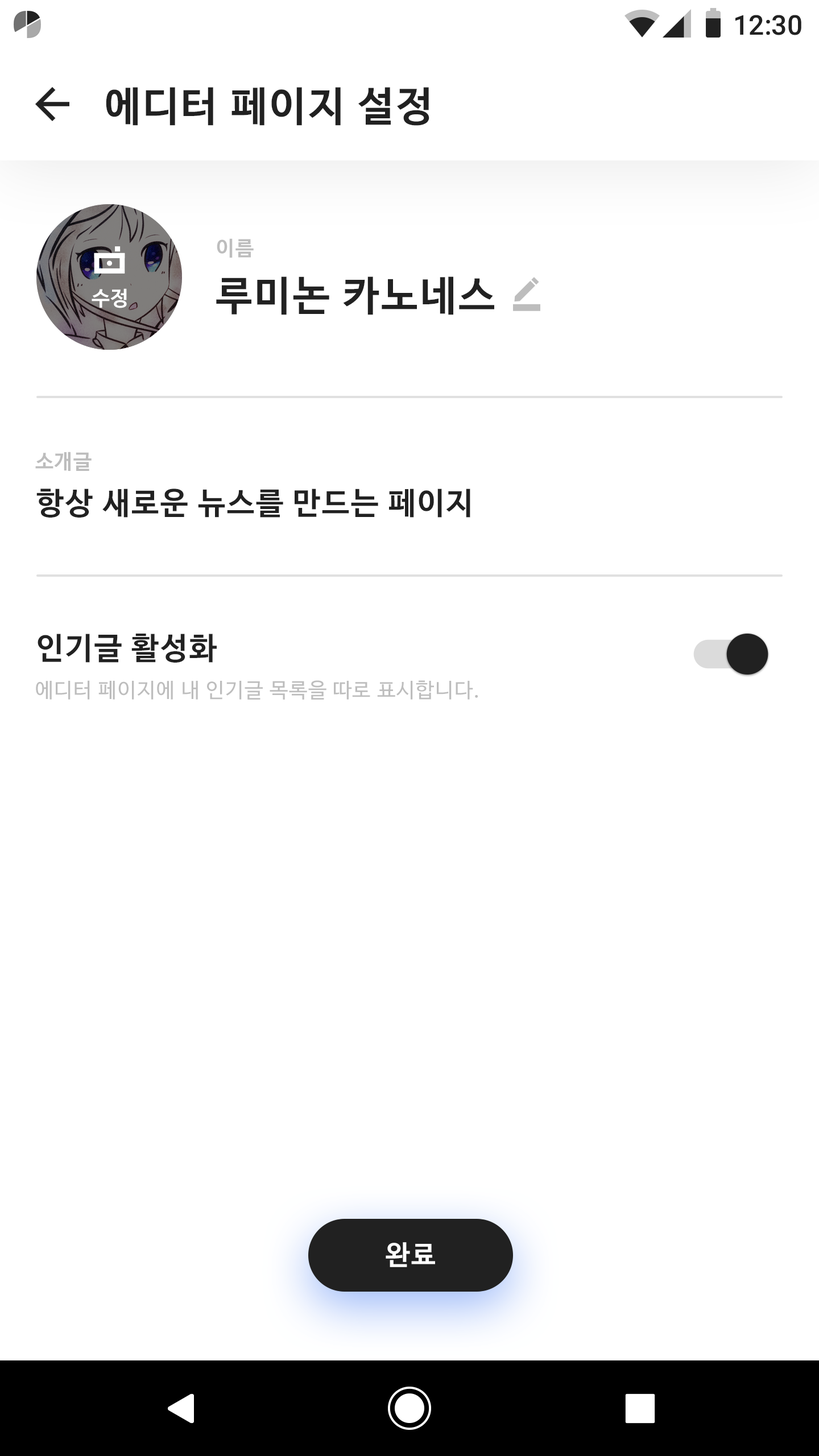
<style>
.page{position:relative;width:819px;height:1456px;background:#ffffff}
.page>*{position:absolute;margin:0}
.t1{font:27.3px "Roboto-Medium";color:#212121}
.t2{font:40.9px "NanumBarunGothicBold";letter-spacing:0.05em;color:#212121}
.t3{font:20.5px "NanumBarunGothicBold";letter-spacing:0.05em;color:#bdbdbd}
.t4{font:20.5px "NanumBarunGothicBold";letter-spacing:0.05em;color:#ffffff}
.t5{font:30.7px "NanumBarunGothicBold";letter-spacing:0.05em;color:#212121}
.t6{font:20.5px "NanumBarunGothic";letter-spacing:0.05em;color:#bdbdbd}
.t7{font:27.3px "NanumBarunGothicBold";letter-spacing:0.05em;color:#ffffff}
</style>
<div class="page">
<p class="t1" style="left:735px;top:15px;width:66px;height:20px">12:30</p>
<p class="t2" style="left:106px;top:87px;width:323px;height:39px">에디터 페이지 설정</p>
<p class="t3" style="left:217px;top:238px;width:37px;height:20px">이름</p>
<p class="t2" style="left:216px;top:276px;width:278px;height:39px">루미논 카노네스</p>
<p class="t4" style="left:92px;top:288px;width:35px;height:20px">수정</p>
<p class="t3" style="left:35px;top:452px;width:57px;height:19px">소개글</p>
<p class="t5" style="left:36px;top:489px;width:434px;height:29px">항상 새로운 뉴스를 만드는 페이지</p>
<p class="t5" style="left:38px;top:634px;width:179px;height:29px">인기글 활성화</p>
<p class="t6" style="left:36px;top:680px;width:442px;height:20px">에디터 페이지에 내 인기글 목록을 따로 표시합니다.</p>
<p class="t7" style="left:386px;top:1242px;width:49px;height:25px">완료</p>
</div>
